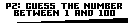
<style>
.page{position:relative;width:128px;height:23px;background:#ffffff}
.page>*{position:absolute;margin:0}
.t1{font:16.9px "Gamer";letter-spacing:-0.02em;color:#000000}
.t2{font:16.9px "Gamer";letter-spacing:-0.04em;color:#000000}
</style>
<div class="page">
<p class="t1" style="left:6px;top:3px;width:116px;height:13px;text-align:center">P2: GUESS T<span class="t2">HE</span> NUMBER<br>BETWEEN 1 <span class="t2">A</span>ND 100</p>
</div>
